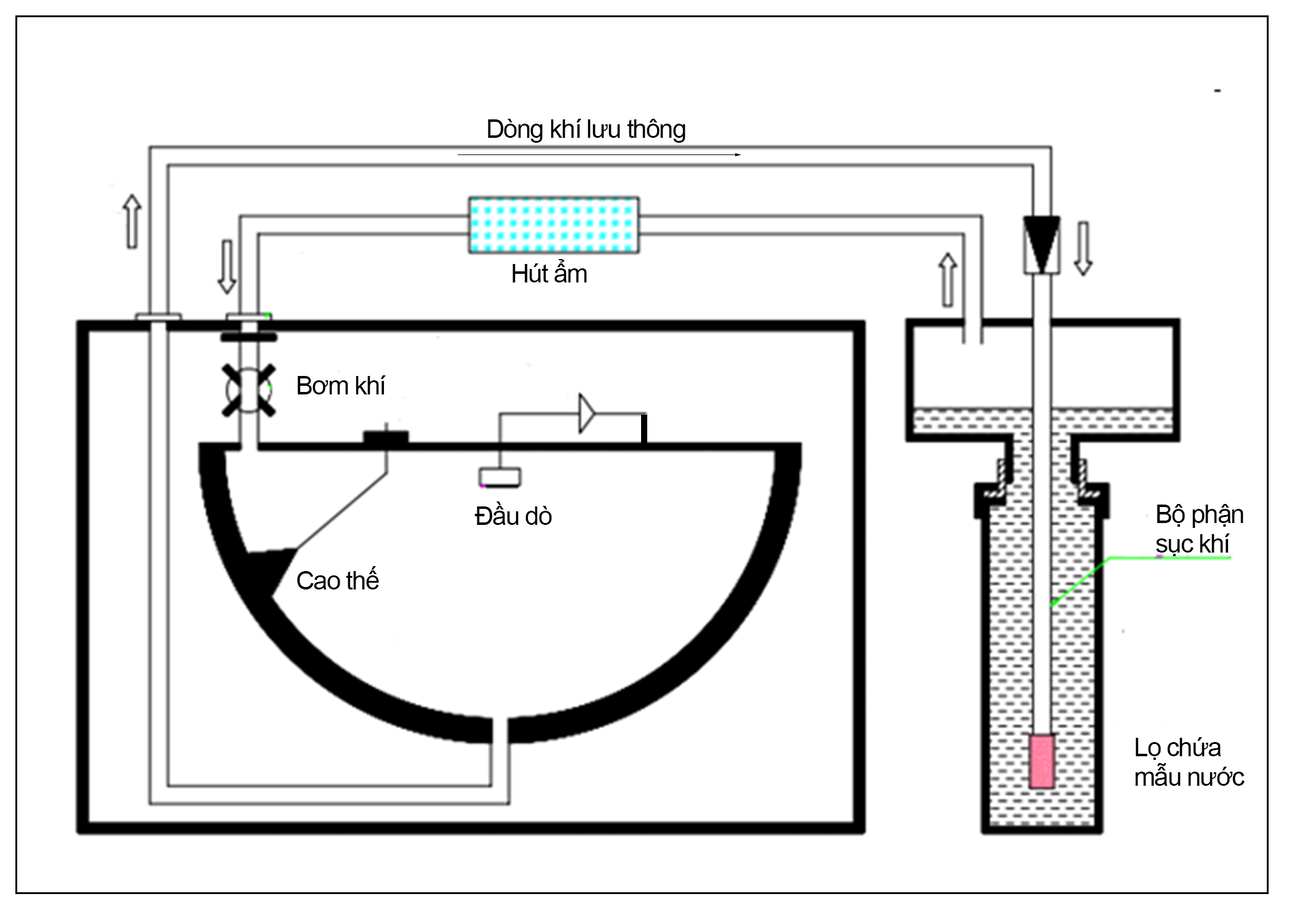
<style>
.page{position:relative;width:1292px;height:923px;background:#ffffff}
.page>*{position:absolute;margin:0}
.t1{font:25.6px "ArialMT";letter-spacing:-0.04em;color:#020002}
</style>
<div class="page">
<p class="t1" style="left:488px;top:119px;width:197px;height:24px">Dòng khí lưu thông</p>
<p class="t1" style="left:513px;top:259px;width:74px;height:23px">Hút ẩm</p>
<p class="t1" style="left:298px;top:375px;width:88px;height:19px">Bơm khí</p>
<p class="t1" style="left:474px;top:501px;width:78px;height:24px">Đầu dò</p>
<p class="t1" style="left:1156px;top:504px;width:87px;height:52px">Bộ phận <br>sục khí</p>
<p class="t1" style="left:297px;top:566px;width:82px;height:23px">Cao thế</p>
<p class="t1" style="left:1135px;top:737px;width:110px;height:49px">Lọ chứa <br>mẫu nước</p>
</div>
